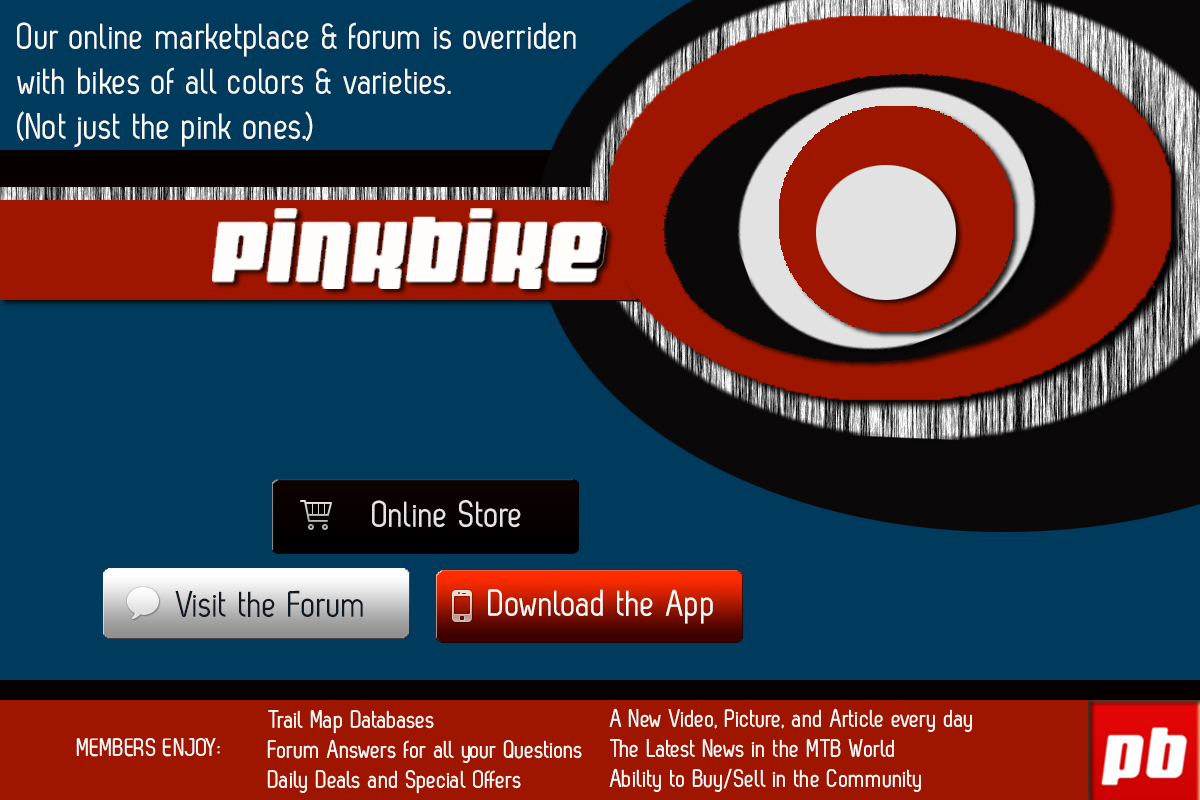
<style>
.page{position:relative;width:1200px;height:800px;background:#003a5d}
.page>*{position:absolute;margin:0}
.t1{font:37.5px "ZagRegular";color:#fdfafa}
.t2{font:37.5px "ZagRegular";color:#e6e2e7}
.t3{font:37.5px "ZagRegular";color:#101820}
.t4{font:25px "ZagRegular";color:#fdfafa}
</style>
<div class="page">
<p class="t1" style="left:17px;top:22px;width:559px;height:126px">Our online marketplace &amp; forum is overriden <br>with bikes of all colors &amp; varieties.<br>(Not just the pink ones.)</p>
<p class="t2" style="left:372px;top:500px;width:149px;height:28px">Online Store</p>
<p class="t3" style="left:175px;top:590px;width:188px;height:28px">Visit the Forum</p>
<p class="t1" style="left:488px;top:589px;width:225px;height:35px">Download the App</p>
<p class="t4" style="left:267px;top:710px;width:315px;height:84px">Trail Map Databases<br>Forum Answers for all your Questions<br>Daily Deals and Special Offers</p>
<p class="t4" style="left:609px;top:708px;width:363px;height:84px">A New Video, Picture, and Article every day<br>The Latest News in the MTB World<br>Ability to Buy/Sell in the Community</p>
<p class="t4" style="left:76px;top:738px;width:144px;height:19px">MEMBERS ENJOY:</p>
</div>
